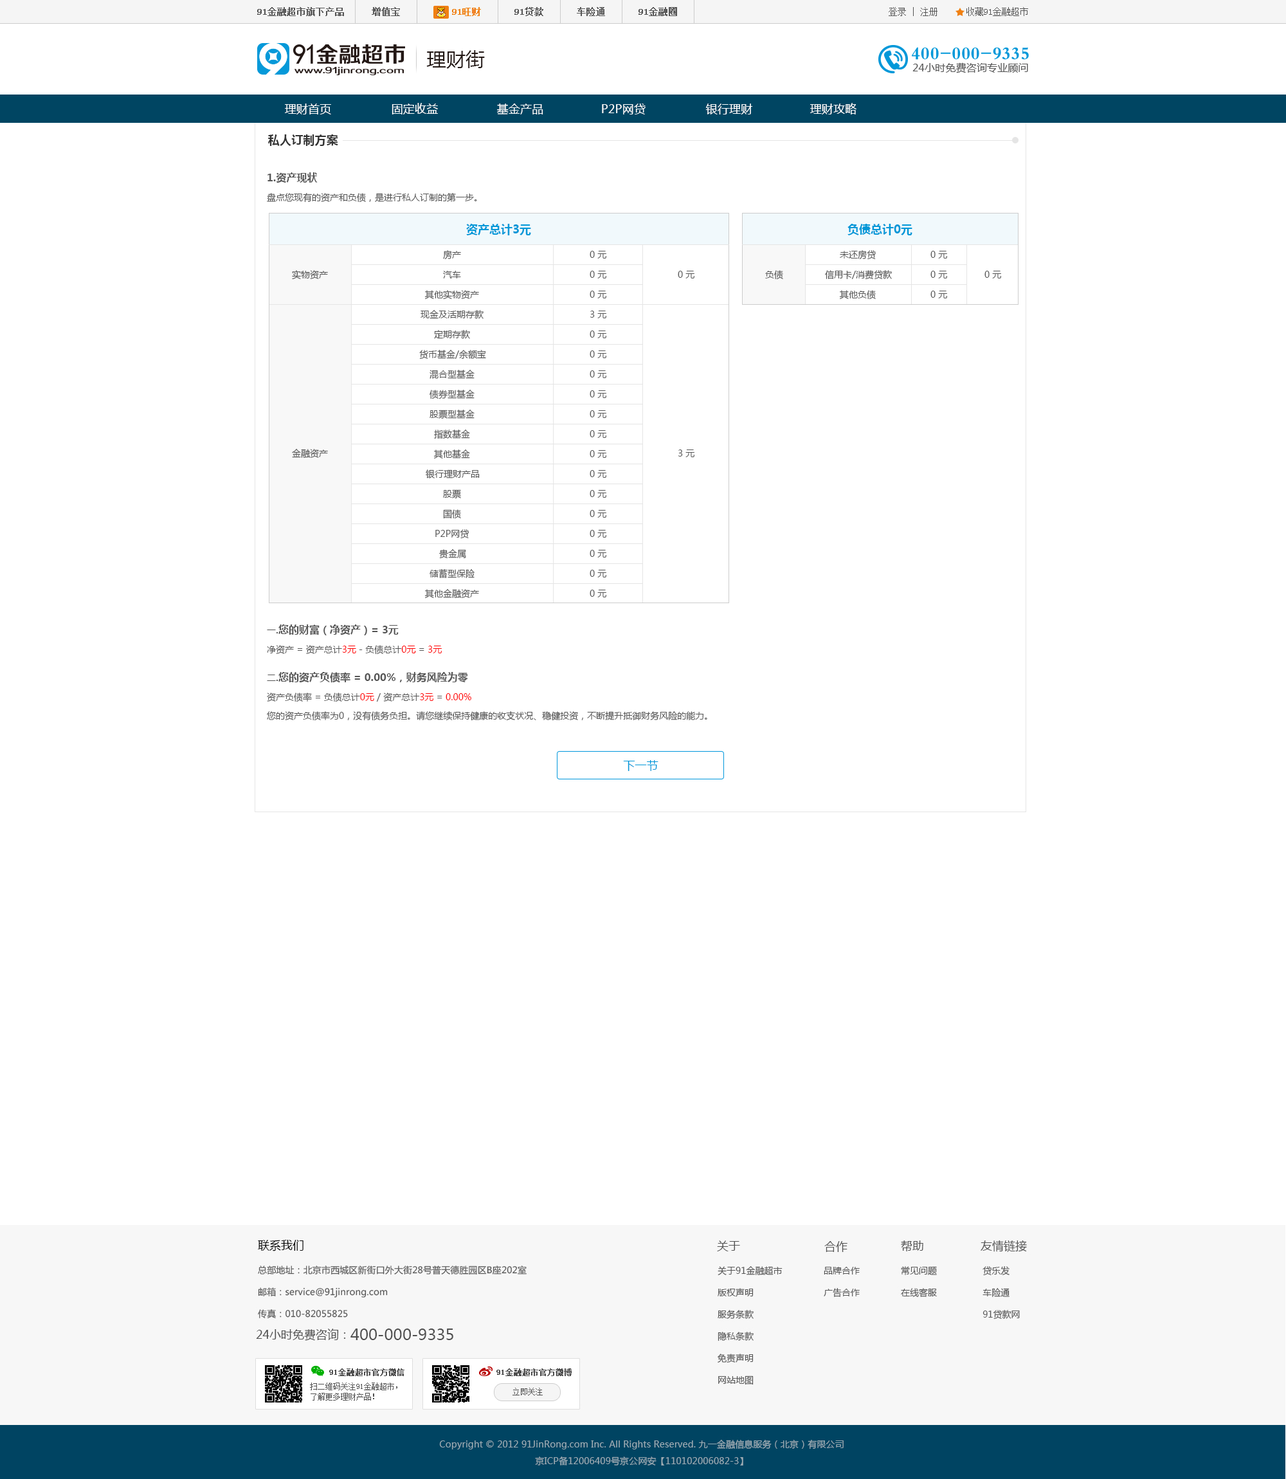
<style>
.page{position:relative;width:1286px;height:1479px;background:#ffffff}
.page>*{position:absolute;margin:0}
.t1{font:19.3px "MicrosoftYaHei";letter-spacing:0.01em;color:#231815}
.t2{font:11.6px "MicrosoftYaHei";letter-spacing:0.01em;color:#ffffff}
.t3{font:11.6px "MicrosoftYaHei-Bold";letter-spacing:0.01em;color:#333333}
.t4{font:10.3px "MicrosoftYaHei-Bold";color:#555555}
.t5{font:9px "MicrosoftYaHei";color:#555555}
.t6{font:11.6px "MicrosoftYaHei-Bold";color:#0098d8}
.t7{font:9px "MicrosoftYaHei-Bold";color:#555555}
.t8{font:9px "MicrosoftYaHei";color:#ff0000}
.t9{font:9px/15.4px "MicrosoftYaHei";color:#555555}
.t10{font:9px/15.4px "MicrosoftYaHei";color:#ff0000}
.t11{font:11.6px "MicrosoftYaHei";letter-spacing:0.01em;color:#0098d9}
</style>
<div class="page">
<p class="t1" style="left:426px;top:50px;width:59px;height:19px">理财街</p>
<p class="t2" style="left:285px;top:104px;width:46px;height:10px">理财首页</p>
<p class="t2" style="left:392px;top:103px;width:46px;height:11px">固定收益</p>
<p class="t2" style="left:497px;top:103px;width:46px;height:11px">基金产品</p>
<p class="t2" style="left:602px;top:104px;width:43px;height:10px">P2P网贷</p>
<p class="t2" style="left:705px;top:104px;width:48px;height:10px">银行理财</p>
<p class="t2" style="left:810px;top:103px;width:46px;height:11px">理财攻略</p>
<p class="t3" style="left:268px;top:134px;width:70px;height:12px">私人订制方案</p>
<p class="t4" style="left:267px;top:172px;width:51px;height:11px">1.资产现状</p>
<p class="t5" style="left:267px;top:193px;width:210px;height:10px">盘点您现有的资产和负债，是进行私人订制的第一步。</p>
<p class="t6" style="left:466px;top:224px;width:65px;height:11px">资产总计3元</p>
<p class="t6" style="left:847px;top:224px;width:65px;height:11px">负债总计0元</p>
<p class="t5" style="left:443px;top:250px;width:18px;height:10px">房产</p>
<p class="t5" style="left:590px;top:251px;width:16px;height:7px">0 元</p>
<p class="t5" style="left:840px;top:250px;width:36px;height:10px">未还房贷</p>
<p class="t5" style="left:930px;top:251px;width:17px;height:7px">0 元</p>
<p class="t5" style="left:292px;top:270px;width:36px;height:10px">实物资产</p>
<p class="t5" style="left:765px;top:270px;width:18px;height:10px">负债</p>
<p class="t5" style="left:825px;top:270px;width:67px;height:10px">信用卡/消费贷款</p>
<p class="t5" style="left:443px;top:271px;width:18px;height:7px">汽车</p>
<p class="t5" style="left:590px;top:271px;width:16px;height:7px">0 元</p>
<p class="t5" style="left:678px;top:271px;width:16px;height:7px">0 元</p>
<p class="t5" style="left:930px;top:271px;width:17px;height:7px">0 元</p>
<p class="t5" style="left:984px;top:271px;width:17px;height:7px">0 元</p>
<p class="t5" style="left:424px;top:290px;width:55px;height:10px">其他实物资产</p>
<p class="t5" style="left:590px;top:291px;width:16px;height:7px">0 元</p>
<p class="t5" style="left:839px;top:290px;width:37px;height:10px">其他负债</p>
<p class="t5" style="left:930px;top:291px;width:17px;height:7px">0 元</p>
<p class="t5" style="left:420px;top:310px;width:63px;height:9px">现金及活期存款</p>
<p class="t5" style="left:590px;top:310px;width:16px;height:8px">3 元</p>
<p class="t5" style="left:434px;top:330px;width:36px;height:9px">定期存款</p>
<p class="t5" style="left:590px;top:330px;width:16px;height:8px">0 元</p>
<p class="t5" style="left:419px;top:350px;width:67px;height:9px">货币基金/余额宝</p>
<p class="t5" style="left:590px;top:350px;width:16px;height:8px">0 元</p>
<p class="t5" style="left:429px;top:370px;width:45px;height:9px">混合型基金</p>
<p class="t5" style="left:590px;top:370px;width:16px;height:8px">0 元</p>
<p class="t5" style="left:429px;top:390px;width:45px;height:9px">债券型基金</p>
<p class="t5" style="left:590px;top:390px;width:16px;height:8px">0 元</p>
<p class="t5" style="left:429px;top:410px;width:45px;height:9px">股票型基金</p>
<p class="t5" style="left:590px;top:410px;width:16px;height:8px">0 元</p>
<p class="t5" style="left:434px;top:429px;width:36px;height:10px">指数基金</p>
<p class="t5" style="left:590px;top:430px;width:16px;height:8px">0 元</p>
<p class="t5" style="left:292px;top:449px;width:36px;height:9px">金融资产</p>
<p class="t5" style="left:433px;top:449px;width:37px;height:10px">其他基金</p>
<p class="t5" style="left:678px;top:449px;width:16px;height:8px">3 元</p>
<p class="t5" style="left:590px;top:450px;width:16px;height:8px">0 元</p>
<p class="t5" style="left:426px;top:469px;width:54px;height:9px">银行理财产品</p>
<p class="t5" style="left:590px;top:470px;width:16px;height:8px">0 元</p>
<p class="t5" style="left:443px;top:489px;width:18px;height:9px">股票</p>
<p class="t5" style="left:590px;top:490px;width:16px;height:8px">0 元</p>
<p class="t5" style="left:443px;top:509px;width:18px;height:10px">国债</p>
<p class="t5" style="left:590px;top:510px;width:16px;height:8px">0 元</p>
<p class="t5" style="left:435px;top:529px;width:34px;height:10px">P2P网贷</p>
<p class="t5" style="left:590px;top:530px;width:16px;height:7px">0 元</p>
<p class="t5" style="left:439px;top:549px;width:27px;height:10px">贵金属</p>
<p class="t5" style="left:590px;top:550px;width:16px;height:7px">0 元</p>
<p class="t5" style="left:429px;top:569px;width:45px;height:9px">储蓄型保险</p>
<p class="t5" style="left:590px;top:570px;width:16px;height:7px">0 元</p>
<p class="t5" style="left:424px;top:589px;width:55px;height:9px">其他金融资产</p>
<p class="t5" style="left:590px;top:590px;width:16px;height:7px">0 元</p>
<p class="t4" style="left:267px;top:624px;width:132px;height:11px"><span class="t7">一.</span>您的财富（净资产）= 3元</p>
<p class="t5" style="left:267px;top:645px;width:175px;height:9px">净资产 = 资产总计<span class="t8">3元</span> - 负债总计<span class="t8">0元</span> = <span class="t8">3元</span></p>
<p class="t4" style="left:267px;top:672px;width:201px;height:11px"><span class="t7">二.</span>您的资产负债率 = 0.00%，财务风险为零</p>
<p class="t9" style="left:267px;top:692px;width:440px;height:29px">资产负债率 = 负债总计<span class="t10">0元</span> / 资产总计<span class="t10">3元</span> = <span class="t10">0.00%<br></span>您的资产负债率为0，没有债务负担。请您继续保持健康的收支状况、稳健投资，不断提升抵御财务风险的能力。</p>
<p class="t11" style="left:623px;top:760px;width:35px;height:11px">下一节</p>
</div>
